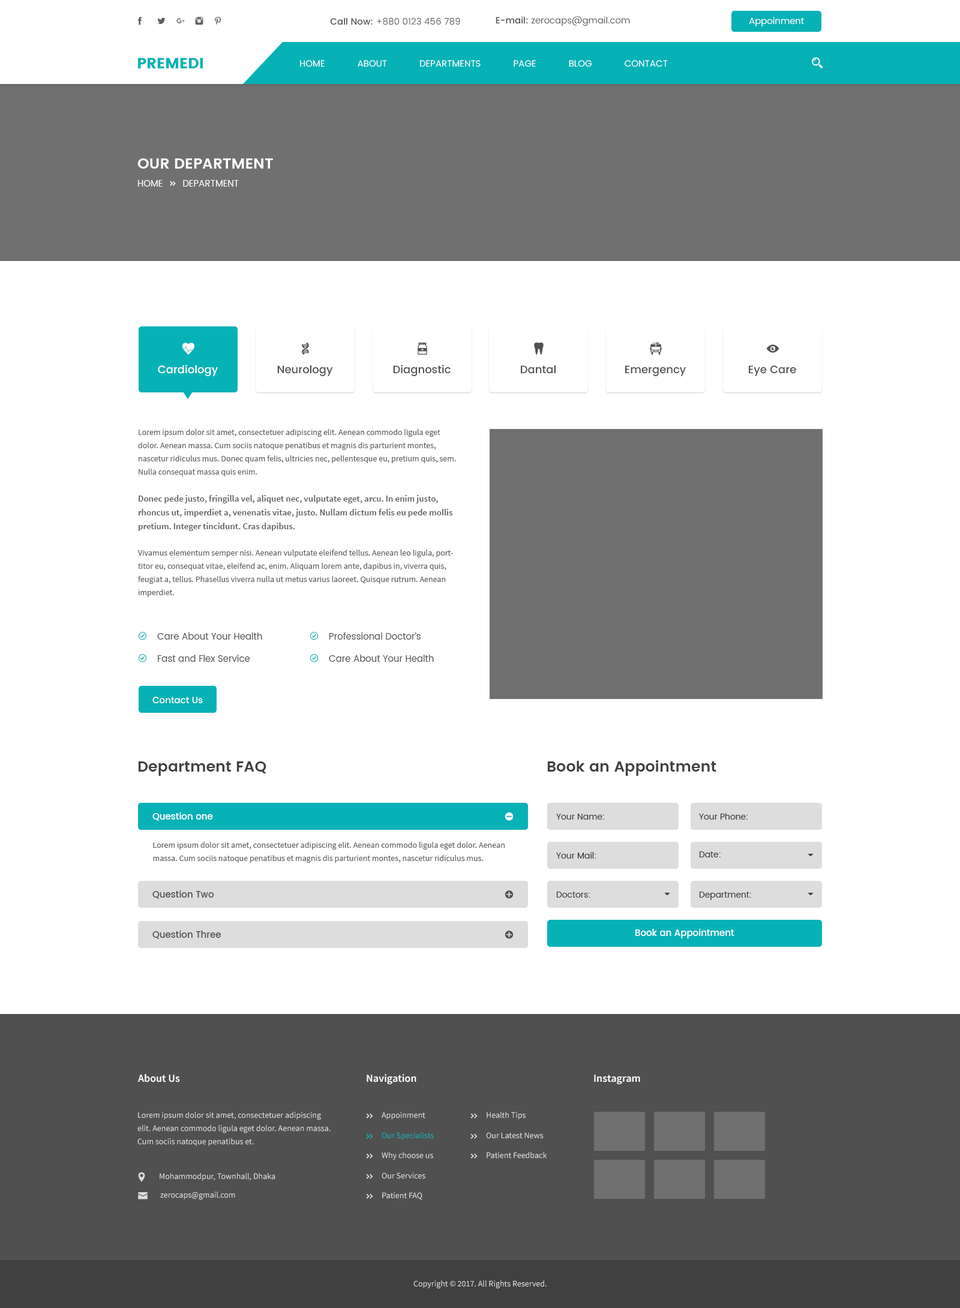
<style>
.page{position:relative;width:960px;height:1308px;background:#ffffff}
.page>*{position:absolute;margin:0}
.t1{font:9px "Poppins-Regular";color:#606060}
.t2{font:9px "Poppins-Medium";color:#505050}
.t3{font:9px "Poppins-Regular";color:#fffefe}
.t4{font:15px "Poppins";color:#06b2b6}
.t5{font:9px "Poppins-Regular";color:#ffffff}
.t6{font:15px "Poppins-SemiBold";color:#ffffff}
.t7{font:10.8px "Poppins-Medium";color:#ffffff}
.t8{font:10.8px "Poppins-Medium";color:#505050}
.t9{font:8.4px/13.2px "SourceSansPro-Regular";color:#606060}
.t10{font:9px/13.8px "SourceSansPro-Semibold";color:#606060}
.t11{font:9px "Poppins-Regular";color:#505050}
.t12{font:9px "Poppins-Medium";color:#fefefe}
.t13{font:15px "Poppins-SemiBold";color:#404040}
.t14{font:9px "Poppins-Medium";color:#ffffff}
.t15{font:8.4px "Poppins-Regular";color:#404040}
.t16{font:10.8px "SourceSansPro-Semibold";color:#ffffff}
.t17{font:8.4px/13.2px "SourceSansPro-Regular";color:#dddddd}
.t18{font:8.4px "SourceSansPro-Regular";color:#dddddd}
.t19{font:8.4px "SourceSansPro-Regular";color:#06b2b6}
</style>
<div class="page">
<p class="t1" style="left:330px;top:17px;width:130px;height:8px"><span class="t2">Call Now: </span>+880 0123 456 789</p>
<p class="t1" style="left:496px;top:16px;width:134px;height:10px"><span class="t2">E-mail: </span>zerocaps@gmail.com</p>
<p class="t3" style="left:749px;top:17px;width:55px;height:9px">Appoinment</p>
<p class="t4" style="left:138px;top:58px;width:65px;height:10px">PREMEDI</p>
<p class="t5" style="left:300px;top:60px;width:368px;height:7px">HOME            ABOUT            DEPARTMENTS            PAGE            BLOG            CONTACT</p>
<p class="t6" style="left:137px;top:158px;width:136px;height:11px">OUR DEPARTMENT</p>
<p class="t7" style="left:158px;top:365px;width:60px;height:11px">Cardiology</p>
<p class="t8" style="left:277px;top:365px;width:56px;height:11px">Neurology</p>
<p class="t8" style="left:393px;top:365px;width:58px;height:11px">Diagnostic</p>
<p class="t8" style="left:521px;top:365px;width:35px;height:9px">Dantal</p>
<p class="t8" style="left:625px;top:365px;width:61px;height:11px">Emergency</p>
<p class="t8" style="left:749px;top:365px;width:47px;height:11px">Eye Care</p>
<p class="t9" style="left:137px;top:429px;width:319px;height:168px">Lorem ipsum dolor sit amet, consectetuer adipiscing elit. Aenean commodo ligula eget dolor. Aenean massa. Cum sociis natoque penatibus et magnis dis parturient montes, nascetur ridiculus mus. Donec quam felis, ultricies nec, pellentesque eu, pretium quis, sem. Nulla consequat massa quis enim. <br><br><span class="t10">Donec pede justo, fringilla vel, aliquet nec, vulputate eget, arcu. In enim justo, rhoncus ut, imperdiet a, venenatis vitae, justo. Nullam dictum felis eu pede mollis pretium. Integer tincidunt. Cras dapibus. <br></span><br>Vivamus elementum semper nisi. Aenean vulputate eleifend tellus. Aenean leo ligula, porttitor eu, consequat vitae, eleifend ac, enim. Aliquam lorem ante, dapibus in, viverra quis, feugiat a, tellus. Phasellus viverra nulla ut metus varius laoreet. Quisque rutrum. Aenean imperdiet.</p>
<p class="t11" style="left:157px;top:632px;width:105px;height:8px">Care About Your Health</p>
<p class="t11" style="left:329px;top:632px;width:92px;height:8px">Professional Doctor’s</p>
<p class="t11" style="left:158px;top:655px;width:92px;height:7px">Fast and Flex Service</p>
<p class="t11" style="left:329px;top:655px;width:105px;height:7px">Care About Your Health</p>
<p class="t12" style="left:152px;top:697px;width:51px;height:7px">Contact Us</p>
<p class="t13" style="left:138px;top:761px;width:128px;height:15px">Department FAQ</p>
<p class="t13" style="left:547px;top:760px;width:169px;height:16px">Book an Appointment</p>
<p class="t14" style="left:152px;top:812px;width:61px;height:9px">Question one</p>
<p class="t15" style="left:556px;top:814px;width:48px;height:6px">Your Name:</p>
<p class="t15" style="left:699px;top:813px;width:49px;height:7px">Your Phone:</p>
<p class="t9" style="left:153px;top:842px;width:352px;height:21px">Lorem ipsum dolor sit amet, consectetuer adipiscing elit. Aenean commodo ligula eget dolor. Aenean massa. Cum sociis natoque penatibus et magnis dis parturient montes, nascetur ridiculus mus.</p>
<p class="t15" style="left:556px;top:852px;width:40px;height:7px">Your Mail:</p>
<p class="t15" style="left:699px;top:851px;width:22px;height:6px">Date:</p>
<p class="t2" style="left:152px;top:890px;width:62px;height:9px">Question Two</p>
<p class="t15" style="left:556px;top:892px;width:34px;height:6px">Doctors:</p>
<p class="t15" style="left:699px;top:892px;width:52px;height:8px">Department:</p>
<p class="t14" style="left:635px;top:929px;width:99px;height:9px">Book an Appointment</p>
<p class="t2" style="left:152px;top:931px;width:69px;height:8px">Question Three</p>
<p class="t16" style="left:138px;top:1074px;width:42px;height:8px">About Us</p>
<p class="t16" style="left:367px;top:1074px;width:49px;height:10px">Navigation</p>
<p class="t16" style="left:594px;top:1075px;width:46px;height:9px">Instagram</p>
<p class="t17" style="left:137px;top:1112px;width:194px;height:34px">Lorem ipsum dolor sit amet, consectetuer adipiscing elit. Aenean commodo ligula eget dolor. Aenean massa. Cum sociis natoque penatibus et.</p>
<p class="t18" style="left:382px;top:1112px;width:43px;height:8px">Appoinment</p>
<p class="t18" style="left:487px;top:1112px;width:39px;height:8px">Health Tips</p>
<p class="t19" style="left:382px;top:1132px;width:52px;height:8px">Our Specialists</p>
<p class="t18" style="left:486px;top:1132px;width:58px;height:7px">Our Latest News</p>
<p class="t18" style="left:382px;top:1152px;width:51px;height:8px">Why choose us</p>
<p class="t18" style="left:487px;top:1152px;width:60px;height:7px">Patient Feedback</p>
<p class="t18" style="left:160px;top:1173px;width:115px;height:8px">Mohammodpur, Townhall, Dhaka</p>
<p class="t18" style="left:382px;top:1172px;width:43px;height:7px">Our Services</p>
<p class="t18" style="left:160px;top:1192px;width:75px;height:8px">zerocaps@gmail.com</p>
<p class="t18" style="left:382px;top:1192px;width:40px;height:8px">Patient FAQ</p>
<p class="t18" style="left:413px;top:1280px;width:134px;height:9px">Copyright © 2017. All Rights Reserved.</p>
</div>
